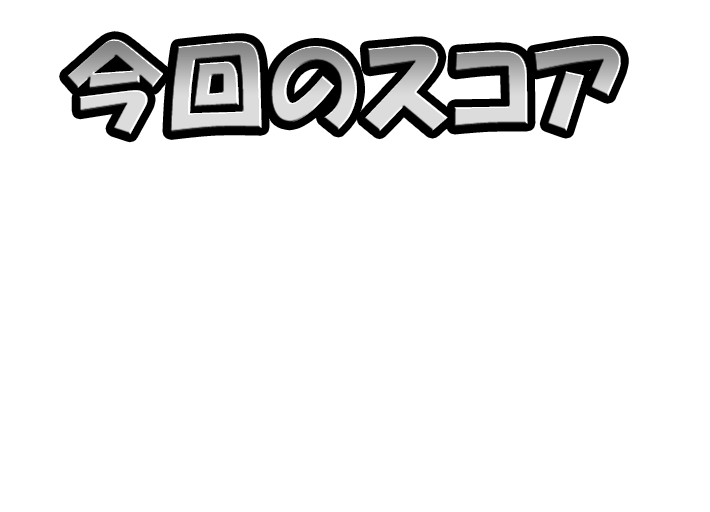
<style>
.page{position:relative;width:710px;height:512px;background:#ffffff}
.page>*{position:absolute;margin:0}
.t1{font:100px "HGPSoeiKakupoptai";letter-spacing:0.02em}
</style>
<div class="page">
<p class="t1" style="left:67px;top:39px;width:554px;height:96px">今回のスコア</p>
</div>
